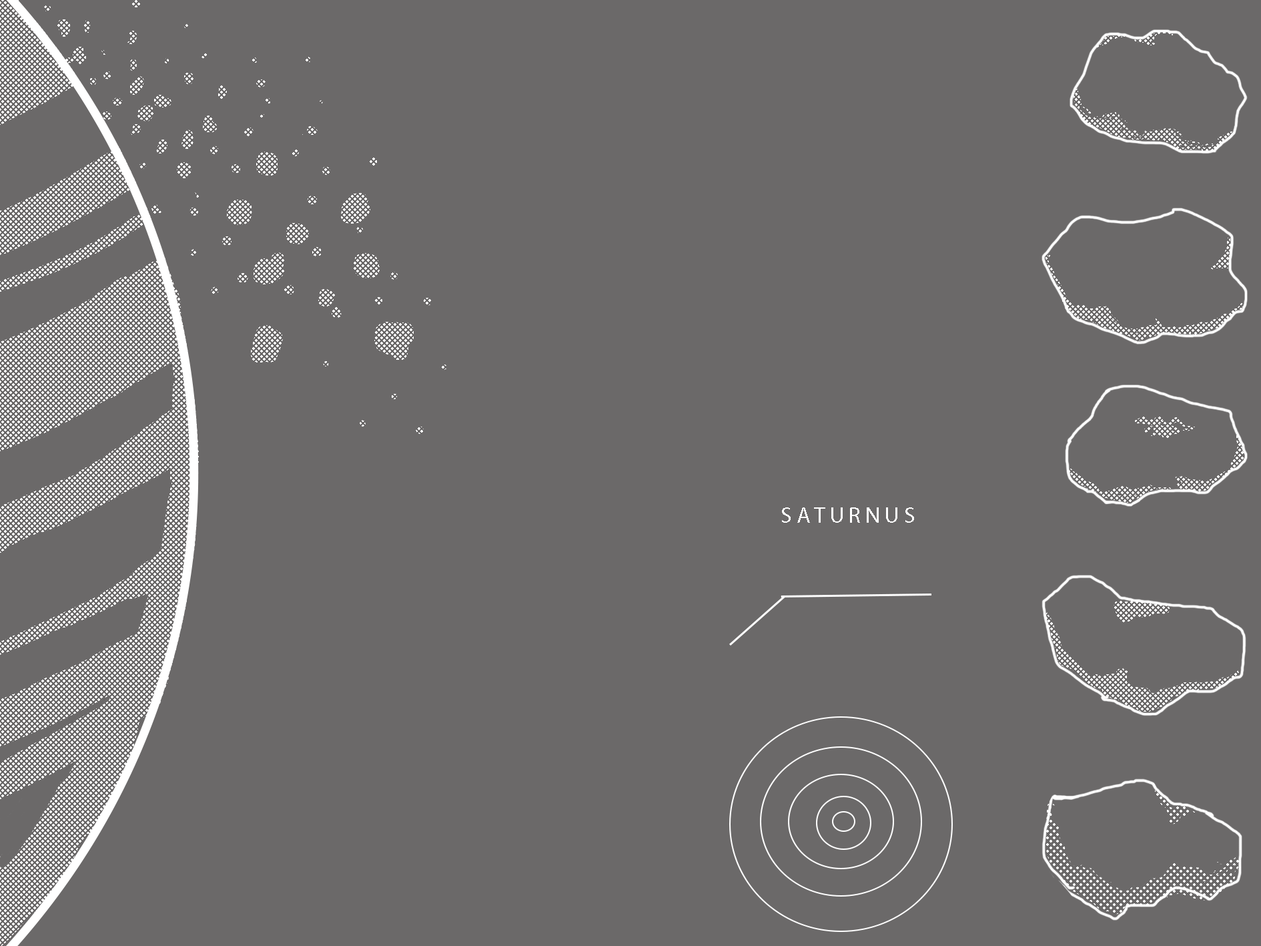
<style>
.page{position:relative;width:1261px;height:946px;background:#6b6969}
.page>*{position:absolute;margin:0}
.t1{font:22.2px "MyriadPro-Regular";color:#ffffff}
</style>
<div class="page">
<p class="t1" style="left:782px;top:507px;width:132px;height:15px">S A T U R N U S</p>
</div>
